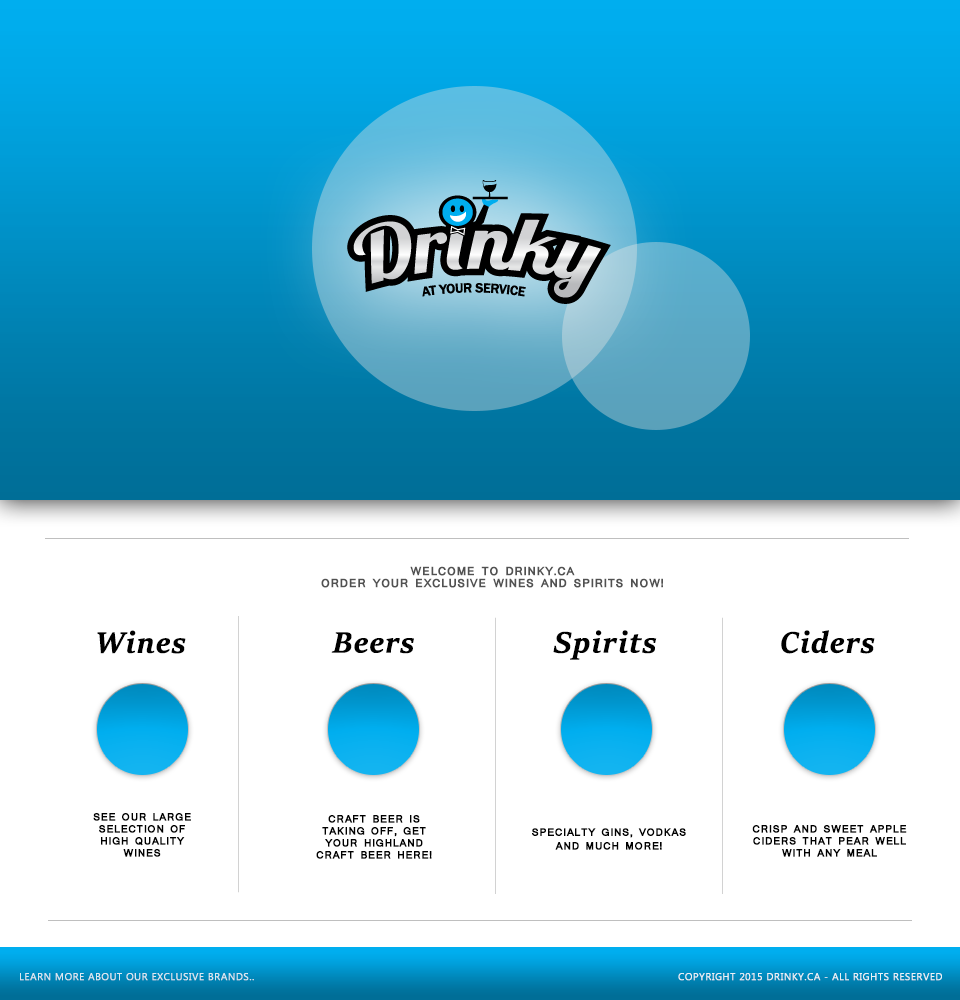
<style>
.page{position:relative;width:960px;height:1000px;background:#ffffff}
.page>*{position:absolute;margin:0}
.t1{font:11px/10px "Mangal-Bold";letter-spacing:0.03em;color:#515151;text-transform:uppercase;font-weight:bold}
.t2{font:33px "SitkaBanner-BoldItalic";letter-spacing:0.03em;color:#000000;font-weight:bold}
.t3{font:10px/12px "Mangal-Bold";letter-spacing:0.03em;color:#000000;text-transform:uppercase;font-weight:bold}
.t4{font:10px "MicrosoftPhagsPa";letter-spacing:0.03em;color:#dae9f2;font-weight:bold}
.t5{font:10px "MicrosoftPhagsPa";letter-spacing:0.03em;color:#ffffff;font-weight:bold}
</style>
<div class="page">
<p class="t1" style="left:321px;top:566px;width:342px;height:22px;text-align:center">welcome to drinky.ca<br>order your exclusive wines and spirits now!</p>
<p class="t2" style="left:97px;top:630px;width:89px;height:24px">Wines</p>
<p class="t2" style="left:553px;top:630px;width:104px;height:30px">Spirits</p>
<p class="t2" style="left:781px;top:630px;width:94px;height:24px">Ciders</p>
<p class="t2" style="left:331px;top:632px;width:83px;height:22px">Beers</p>
<p class="t3" style="left:93px;top:813px;width:98px;height:44px;text-align:center">see our large selection of high quality wines</p>
<p class="t3" style="left:316px;top:815px;width:116px;height:44px;text-align:center">craft beer is taking off, get your highland craft beer here!</p>
<p class="t3" style="left:532px;top:828px;width:154px;height:22px;text-align:center">specialty gins, vodkas<br>and much more!</p>
<p class="t3" style="left:752px;top:825px;width:155px;height:32px;text-align:center">Crisp and sweet apple ciders that pear well with any meal</p>
<p class="t4" style="left:20px;top:973px;width:234px;height:8px">LEARN MORE ABOUT OUR EXCLUSIVE BRANDS..</p>
<p class="t5" style="left:678px;top:973px;width:264px;height:8px;opacity:0.87">COPYRIGHT 2015 DRINKY.CA - ALL RIGHTS RESERVED</p>
</div>
